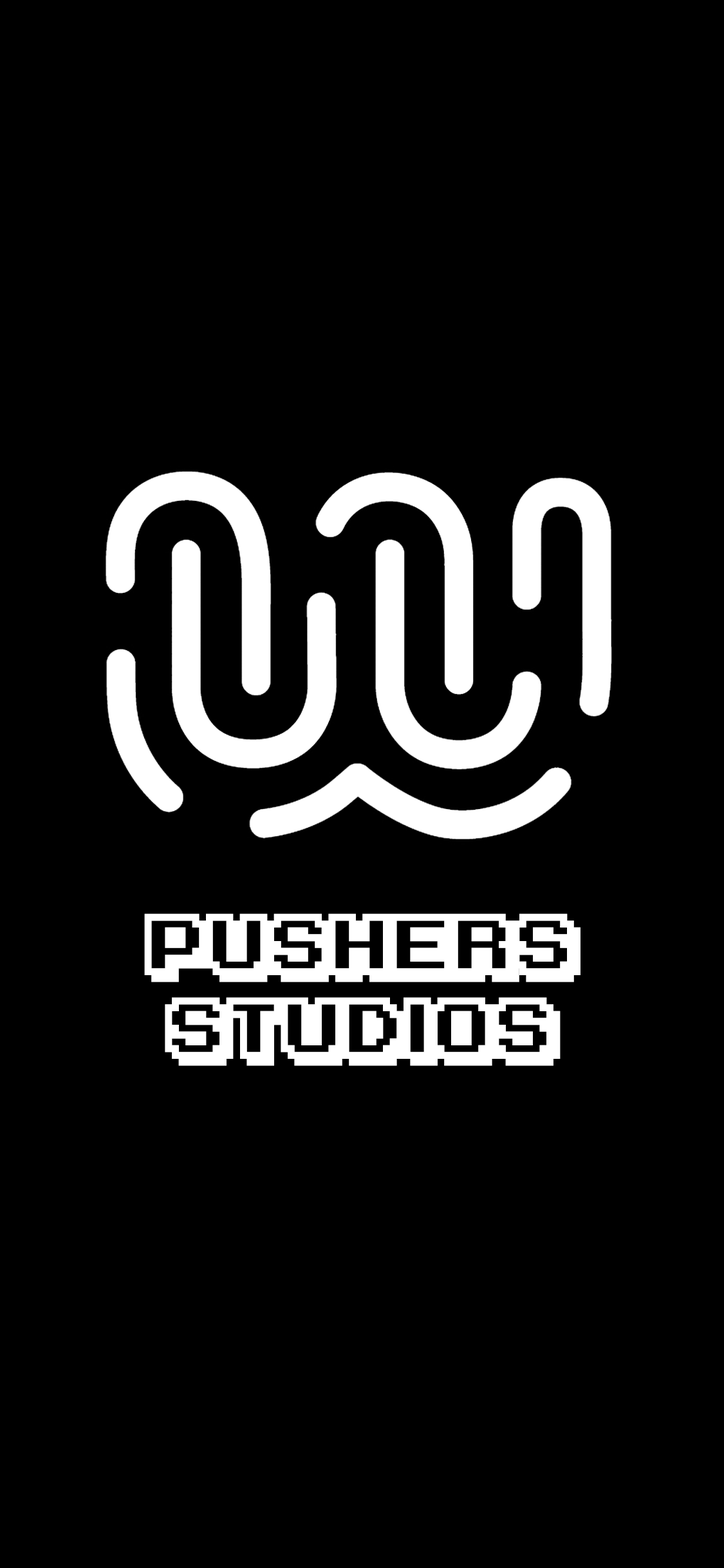
<style>
.page{position:relative;width:724px;height:1568px;background:#000000}
.page>*{position:absolute;margin:0}
.t1{font:69.7px "KarmaticArcade";color:#ffffff}
</style>
<div class="page">
<p class="t1" style="left:144px;top:913px;width:437px;height:153px;text-align:center">PUSHERS<br>studios</p>
</div>
